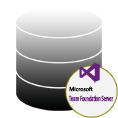
<style>
.page{position:relative;width:118px;height:118px;background:#ffffff}
.page>*{position:absolute;margin:0}
.t1{font:8.1px "Calibri";color:#68217a;scale:0.55 1}
</style>
<div class="page">
<p class="t1" style="left:68px;top:95px;width:46px;height:7px">Team Foundation Server</p>
</div>
